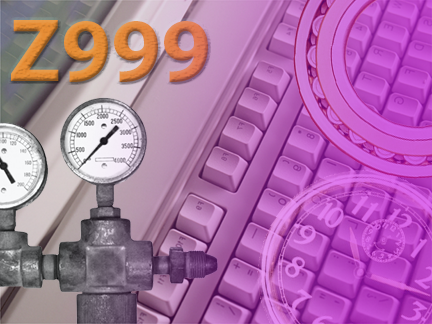
<style>
.page{position:relative;width:432px;height:324px}
.page>*{position:absolute;margin:0}
.t1{font:90px "MyriadPro-Bold"}
</style>
<div class="page">
<p class="t1" style="left:11px;top:20px;width:197px;height:62px">Z999</p>
</div>
